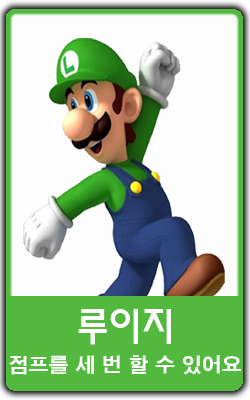
<style>
.page{position:relative;width:250px;height:400px;background:#fdfdfd}
.page>*{position:absolute;margin:0}
.t1{font:40px "MoeumTR-HM";color:#ffffff}
.t2{font:20px "H2gtrE";color:#ffffff}
</style>
<div class="page">
<p class="t1" style="left:78px;top:309px;width:93px;height:36px">루이지</p>
<p class="t2" style="left:9px;top:355px;width:233px;height:20px">점프를 세 번 할 수 있어요</p>
</div>
